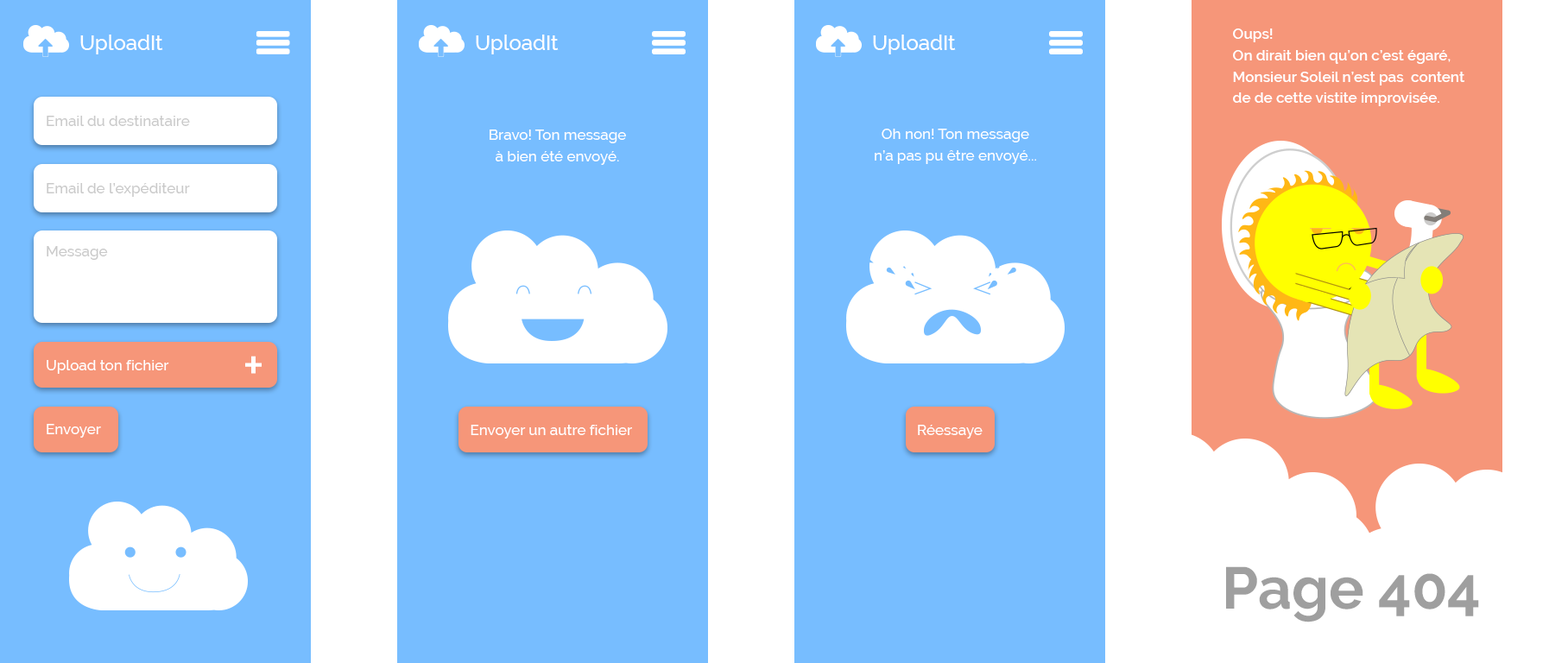
<style>
.page{position:relative;width:1568px;height:663px;background:#77bdff}
.page>*{position:absolute;margin:0}
.t1{font:14.7px/21.4px "Raleway-SemiBold";color:#ffffff}
.t2{font:20.6px "Raleway-Medium";color:#ffffff}
.t3{font:14.7px "Raleway-Medium";color:#cacaca}
.t4{font:14.7px/21.4px "Raleway-Medium";color:#ffffff}
.t5{font:14.7px "Raleway-Medium";color:#ffffff}
.t6{font:51.8px "Raleway-Medium";color:#ffffff}
.t7{font:58.7px "Raleway-Bold";color:#9f9f9f}
</style>
<div class="page">
<p class="t1" style="left:1233px;top:28px;width:232px;height:78px;text-align:justify">Oups!<br>On dirait bien qu’on c’est égaré,<br>Monsieur Soleil n’est pas  content<br>de de cette vistite improvisée.</p>
<p class="t2" style="left:80px;top:35px;width:83px;height:19px">UploadIt</p>
<p class="t2" style="left:476px;top:35px;width:83px;height:19px">UploadIt</p>
<p class="t2" style="left:873px;top:35px;width:83px;height:19px">UploadIt</p>
<p class="t3" style="left:47px;top:116px;width:143px;height:10px">Email du destinataire</p>
<p class="t4" style="left:490px;top:130px;width:136px;height:35px;text-align:center">Bravo! Ton message<br>à bien été envoyé.</p>
<p class="t4" style="left:875px;top:129px;width:161px;height:35px;text-align:center">Oh non! Ton message<br>n’a pas pu être envoyé...</p>
<p class="t3" style="left:47px;top:183px;width:143px;height:14px">Email de l’expéditeur</p>
<p class="t3" style="left:47px;top:246px;width:61px;height:14px">Message</p>
<p class="t5" style="left:47px;top:360px;width:122px;height:14px">Upload ton fichier</p>
<p class="t6" style="left:245px;top:356px;width:17px;height:18px">+</p>
<p class="t5" style="left:47px;top:424px;width:54px;height:14px">Envoyer</p>
<p class="t5" style="left:471px;top:425px;width:161px;height:14px">Envoyer un autre fichier</p>
<p class="t5" style="left:918px;top:425px;width:65px;height:14px">Réessaye</p>
<p class="t7" style="left:1226px;top:566px;width:253px;height:57px">Page 404</p>
</div>
